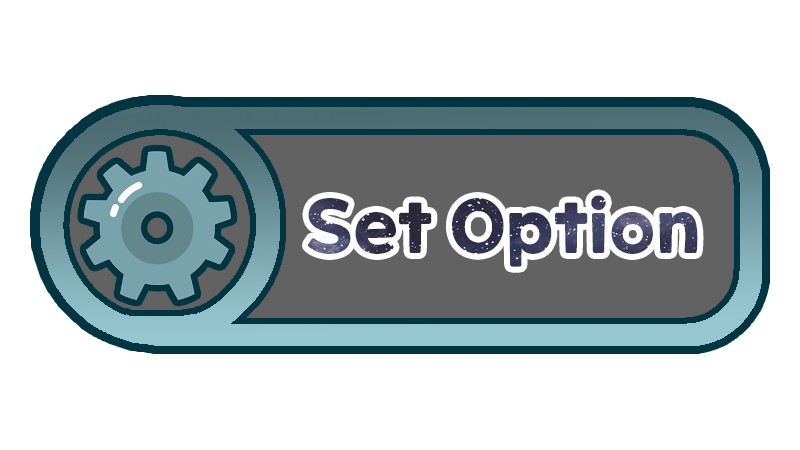
<style>
.page{position:relative;width:800px;height:450px;background:#ffffff}
.page>*{position:absolute;margin:0}
.t1{font:72px "ONEMobilePOPOTFRegular"}
</style>
<div class="page">
<p class="t1" style="left:308px;top:195px;width:390px;height:72px">Set Option</p>
</div>
